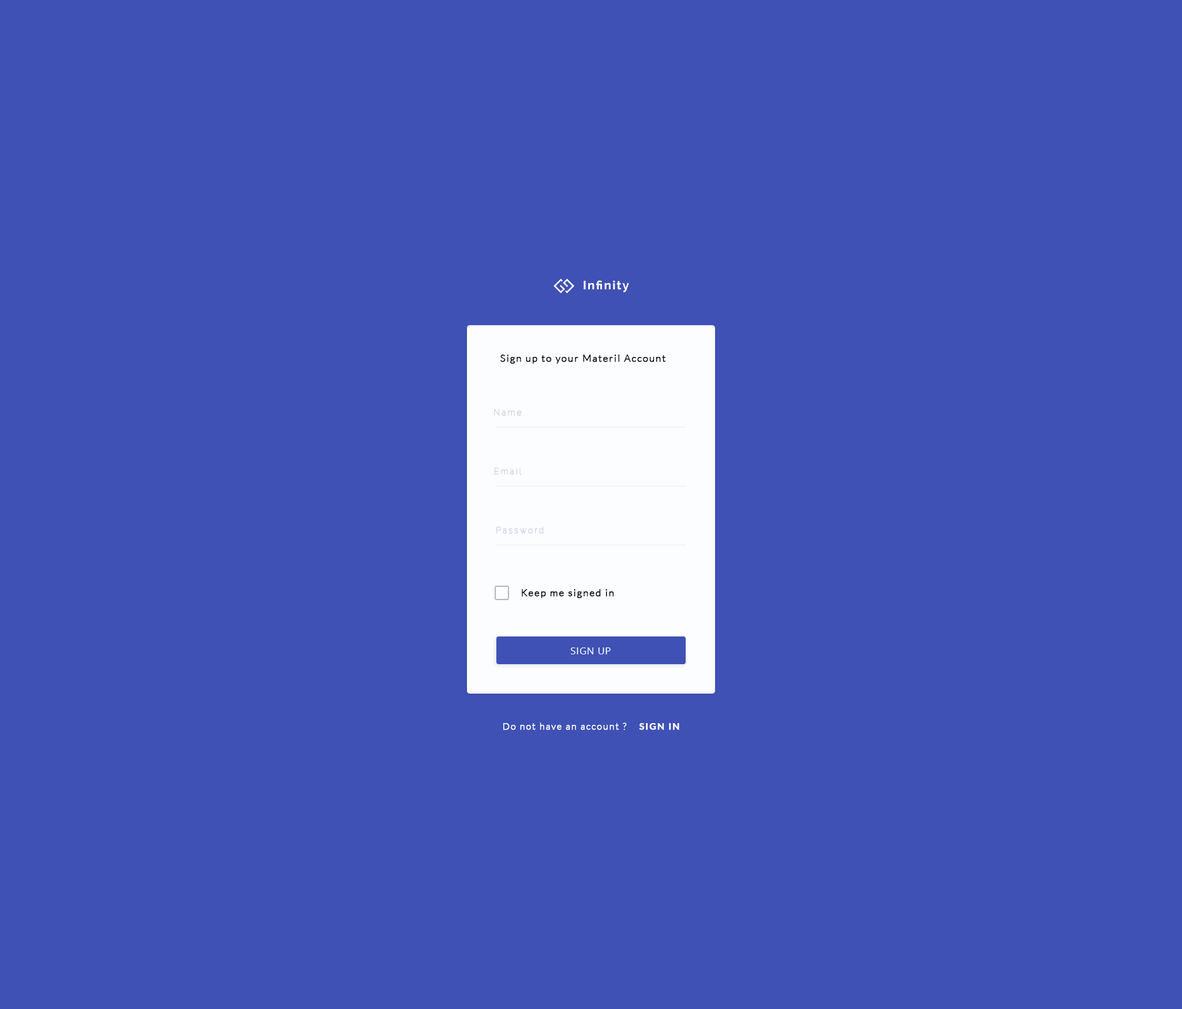
<style>
.page{position:relative;width:1182px;height:1009px;background:#3f51b5}
.page>*{position:absolute;margin:0}
.t1{font:12px "Raleway-Bold";letter-spacing:0.1em;color:#ffffff}
.t2{font:9.6px "Lato-Light";letter-spacing:0.1em;color:#000000;font-weight:bold}
.t3{font:8.1px "Raleway-Thin";letter-spacing:0.2em;color:#c9ccdd;font-weight:bold}
.t4{font:9.6px "OpenSans";letter-spacing:0.05em;color:#fbfdff}
.t5{font:9.2px "Lato-Light";letter-spacing:0.1em;color:#fbfdff;font-weight:bold}
.t6{font:9.2px "Lato-Bold";letter-spacing:0.1em;color:#fbfdff;font-weight:bold}
</style>
<div class="page">
<p class="t1" style="left:584px;top:280px;width:45px;height:12px">Infinity</p>
<p class="t2" style="left:501px;top:354px;width:165px;height:10px">Sign up to your Materil Account</p>
<p class="t3" style="left:494px;top:409px;width:28px;height:7px">Name</p>
<p class="t3" style="left:495px;top:468px;width:27px;height:7px">Email</p>
<p class="t3" style="left:496px;top:527px;width:48px;height:6px">Password</p>
<p class="t2" style="left:522px;top:589px;width:92px;height:9px">Keep me signed in</p>
<p class="t4" style="left:571px;top:647px;width:40px;height:7px">SIGN UP</p>
<p class="t5" style="left:503px;top:722px;width:176px;height:8px">Do not have an account ? <span class="t6">   SIGN IN</span></p>
</div>
